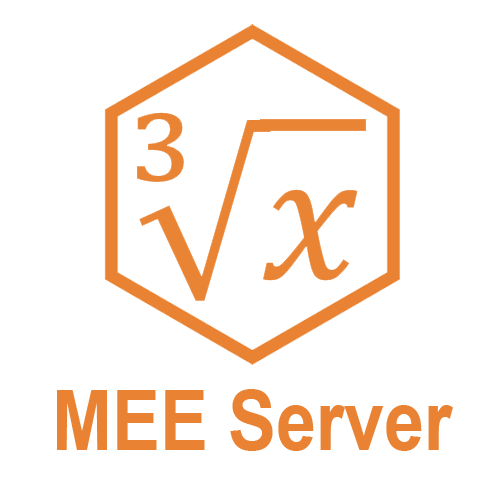
<style>
.page{position:relative;width:496px;height:496px;background:#ffffff}
.page>*{position:absolute;margin:0}
.t1{font:84px "Arial-BoldMT";color:#e98333;scale:0.86 1}
</style>
<div class="page">
<p class="t1" style="left:57px;top:389px;width:396px;height:62px">MEE Server</p>
</div>
